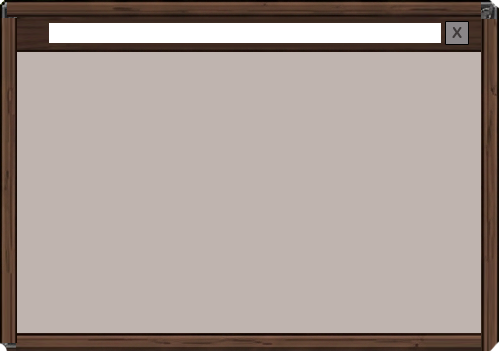
<style>
.page{position:relative;width:499px;height:351px;background:#bfb4af}
.page>*{position:absolute;margin:0}
.t1{font:14.6px "ArialRoundedMTBold";letter-spacing:0.08em;color:#3f3a3a;scale:1.1 1}
</style>
<div class="page">
<p class="t1" style="left:452px;top:27px;width:10px;height:11px">X</p>
</div>
